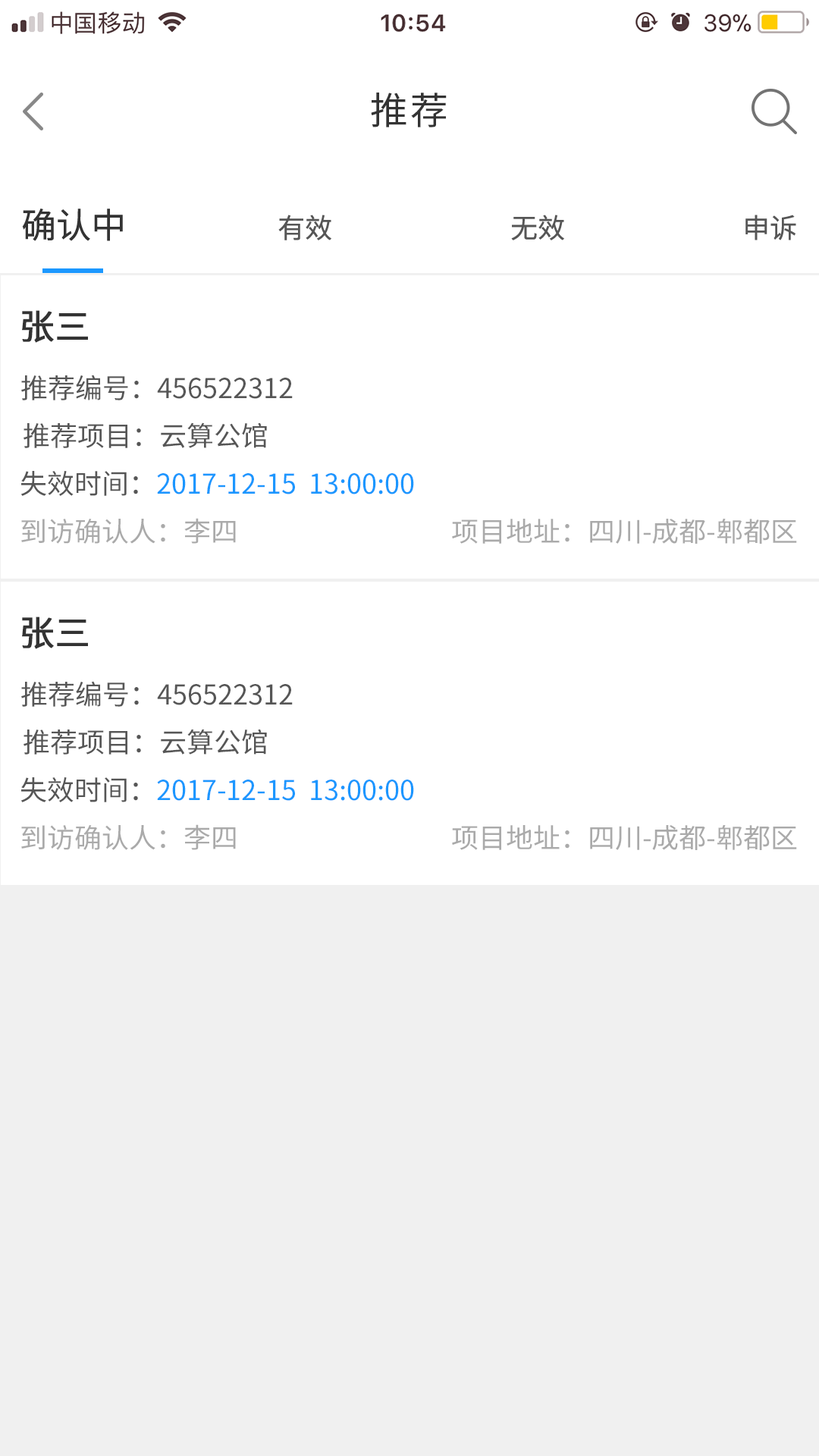
<style>
.page{position:relative;width:819px;height:1456px;background:#ffffff}
.page>*{position:absolute;margin:0}
.t1{font:37.9px "SourceHanSansCN-Regular";letter-spacing:0.06em;color:#333333}
.t2{font:34.9px "SourceHanSansCN-Regular";color:#333333}
.t3{font:27.3px "SourceHanSansCN-Regular";color:#565656}
.t4{font:34.9px "SourceHanSansCN-Regular";color:#333333;font-weight:bold}
.t5{font:27.3px "SourceHanSansCN-Regular";color:#1c97ff}
.t6{font:27.3px "SourceHanSansCN-Regular";color:#aaaaaa}
</style>
<div class="page">
<p class="t1" style="left:371px;top:93px;width:76px;height:34px">推荐</p>
<p class="t2" style="left:22px;top:209px;width:101px;height:32px">确认中</p>
<p class="t3" style="left:278px;top:215px;width:53px;height:25px">有效</p>
<p class="t3" style="left:511px;top:215px;width:53px;height:25px">无效</p>
<p class="t3" style="left:745px;top:215px;width:51px;height:25px">申诉</p>
<p class="t4" style="left:22px;top:310px;width:66px;height:33px">张三</p>
<p class="t3" style="left:21px;top:375px;width:272px;height:25px">推荐编号：456522312</p>
<p class="t3" style="left:24px;top:422px;width:243px;height:26px">推荐项目：云算公馆</p>
<p class="t5" style="left:20px;top:471px;width:394px;height:25px"><span class="t3">失效时间：</span>2017-12-15  13:00:00</p>
<p class="t6" style="left:21px;top:518px;width:215px;height:26px">到访确认人：李四</p>
<p class="t6" style="left:452px;top:518px;width:345px;height:26px">项目地址：四川-成都-郫都区</p>
<p class="t4" style="left:22px;top:617px;width:66px;height:32px">张三</p>
<p class="t3" style="left:21px;top:681px;width:272px;height:26px">推荐编号：456522312</p>
<p class="t3" style="left:24px;top:729px;width:243px;height:26px">推荐项目：云算公馆</p>
<p class="t5" style="left:20px;top:777px;width:394px;height:25px"><span class="t3">失效时间：</span>2017-12-15  13:00:00</p>
<p class="t6" style="left:21px;top:824px;width:215px;height:26px">到访确认人：李四</p>
<p class="t6" style="left:452px;top:824px;width:345px;height:26px">项目地址：四川-成都-郫都区</p>
</div>
